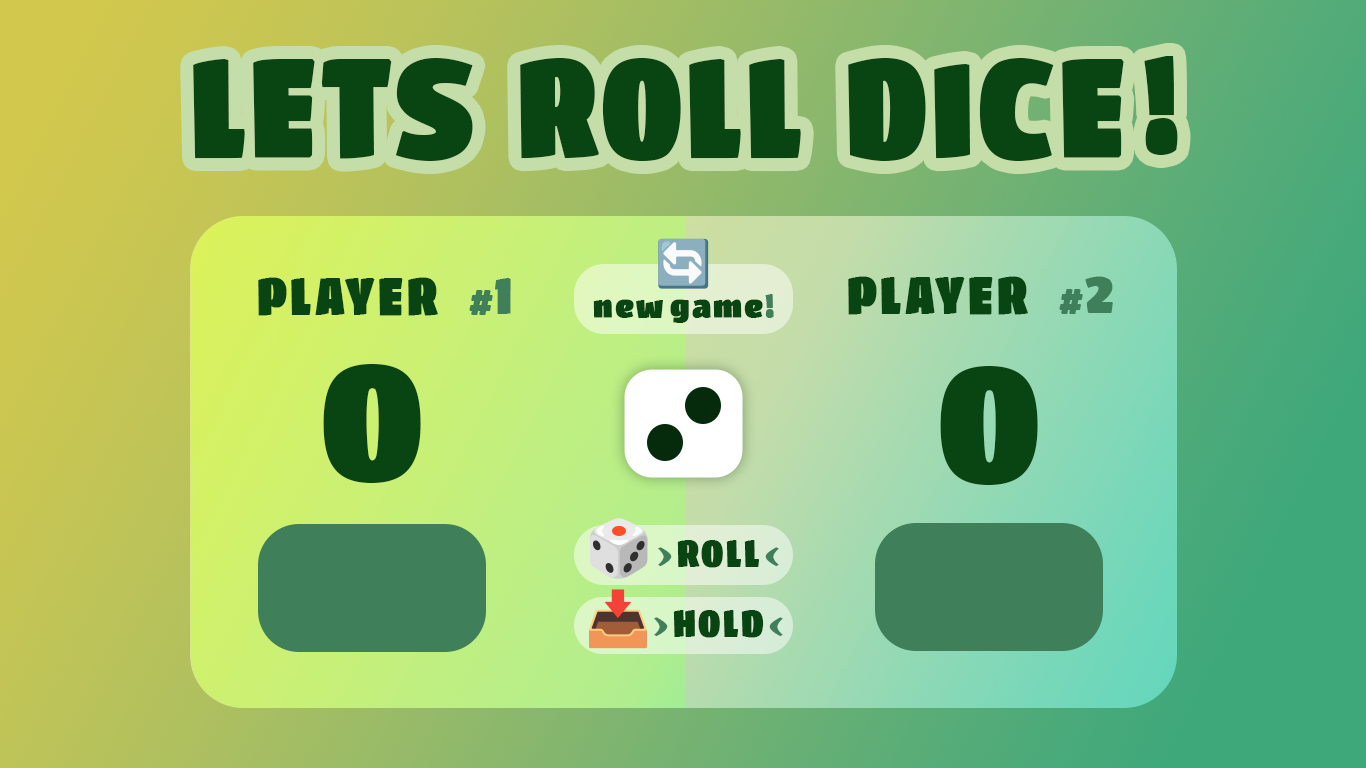
<style>
.page{position:relative;width:1366px;height:768px}
.page>*{position:absolute;margin:0}
.t1{font:132.4px "Colak";letter-spacing:0.04em;color:#084513}
.t2{font:50px "Colak";letter-spacing:0.08em;color:#084513}
.t3{font:30px "Colak";letter-spacing:0.08em;color:#3f7f5a}
.t4{font:50px "Colak";letter-spacing:0.08em;color:#3f7f5a}
.t5{font:32.4px "Colak";letter-spacing:0.08em;color:#084513}
.t6{font:32.4px "Colak";letter-spacing:0.08em;color:#3f7f5a}
.t7{font:161px "Colak";letter-spacing:0.08em;color:#084513}
.t8{font:36.3px "Colak";letter-spacing:0.08em;color:#084513}
.t9{font:36.3px "Colak";letter-spacing:0.08em;color:#3f7f5a}
</style>
<div class="page">
<p class="t1" style="left:193px;top:56px;width:985px;height:105px">LETS   ROLL   DICE !</p>
<p class="t2" style="left:258px;top:277px;width:253px;height:39px">PLAYER    <span class="t3">#</span><span class="t4">1</span></p>
<p class="t2" style="left:848px;top:276px;width:265px;height:39px">PLAYER    <span class="t3">#</span><span class="t4">2</span></p>
<p class="t5" style="left:593px;top:294px;width:181px;height:29px">new game<span class="t6">!</span></p>
<p class="t7" style="left:323px;top:364px;width:98px;height:119px">0</p>
<p class="t7" style="left:940px;top:366px;width:98px;height:119px">0</p>
<p class="t8" style="left:658px;top:540px;width:121px;height:28px"><span class="t9">&gt;</span>ROLL <span class="t9">&lt;</span></p>
<p class="t8" style="left:654px;top:610px;width:129px;height:28px"><span class="t9">&gt;</span>HOLD <span class="t9">&lt;</span></p>
</div>
